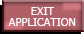
<style>
.page{position:relative;width:84px;height:34px;background:#b16067}
.page>*{position:absolute;margin:0}
.t1{font:11px/11px "Tahoma";color:#ffffff}
</style>
<div class="page">
<p class="t1" style="left:8px;top:7px;width:68px;height:19px;text-align:center">EXIT<br>APPLICATION</p>
<p class="t1" style="left:8px;top:7px;width:68px;height:19px;text-align:center">EXIT<br>APPLICATION</p>
</div>
